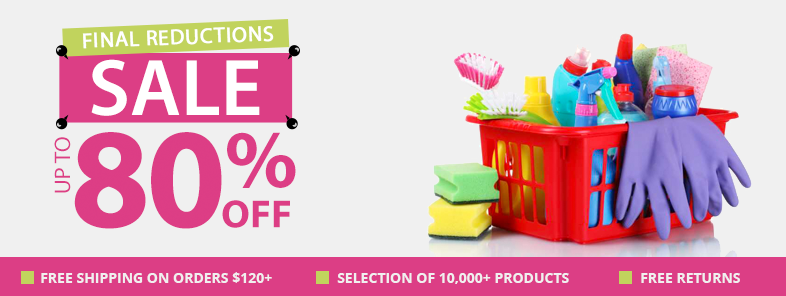
<style>
.page{position:relative;width:786px;height:296px;background:#f0f0f0}
.page>*{position:absolute;margin:0}
.t1{font:21.3px "MyriadPro-Regular";letter-spacing:0.025em;color:#ffffff;font-weight:bold}
.t2{font:80.8px "MyriadPro-Semibold";color:#ffffff}
.t3{font:22.5px "MyriadPro-Regular";color:#dc3e85}
.t4{font:143.5px "MyriadPro-Bold";letter-spacing:-0.025em;color:#dc3e85}
.t5{font:82.6px "MyriadPro-Bold";color:#dc3e85}
.t6{font:39.2px "MyriadPro-Bold";color:#dc3e85}
.t7{font:14px "OpenSans-Bold";color:#f0f0f0;text-transform:uppercase}
</style>
<div class="page">
<p class="t1" style="left:82px;top:26px;width:192px;height:23px;rotate:-2deg">FINAL REDUCTIONS</p>
<p class="t2" style="left:91px;top:59px;width:169px;height:57px">SALE</p>
<p class="t3" style="left:54px;top:137px;width:17px;height:56px;rotate:-90deg">UP TO</p>
<p class="t4" style="left:74px;top:132px;width:148px;height:97px">80</p>
<p class="t5" style="left:227px;top:132px;width:69px;height:56px">%</p>
<p class="t6" style="left:222px;top:200px;width:68px;height:28px">OFF</p>
<p class="t7" style="left:41px;top:272px;width:231px;height:11px">Free Shipping on orders $120+</p>
<p class="t7" style="left:337px;top:273px;width:232px;height:11px">selection of 10,000+ products</p>
<p class="t7" style="left:641px;top:273px;width:99px;height:10px">fREE RETURNS</p>
</div>
